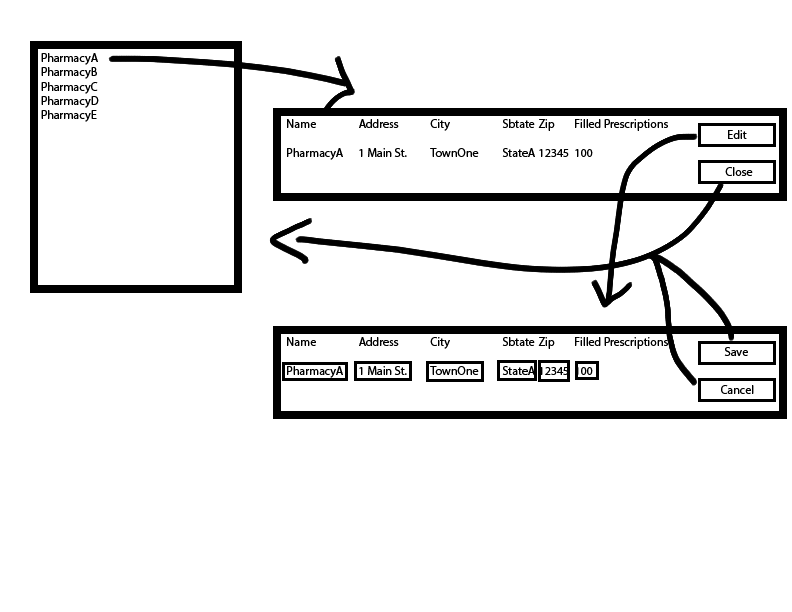
<style>
.page{position:relative;width:792px;height:612px;background:#ffffff}
.page>*{position:absolute;margin:0}
.t1{font:12px "MyriadPro-Regular";color:#000000}
</style>
<div class="page">
<p class="t1" style="left:41px;top:53px;width:58px;height:69px">PharmacyA<br>PharmacyB<br>PharmacyC<br>PharmacyD<br>PharmacyE</p>
<p class="t1" style="left:287px;top:119px;width:381px;height:41px">Name  Address City  Sbtate Zip Filled Prescriptions<br><br>PharmacyA  1 Main St.  TownOne  StateA  12345  100</p>
<p class="t1" style="left:728px;top:130px;width:19px;height:9px">Edit</p>
<p class="t1" style="left:725px;top:167px;width:28px;height:9px">Close</p>
<p class="t1" style="left:724px;top:347px;width:24px;height:9px">Save</p>
<p class="t1" style="left:721px;top:385px;width:33px;height:9px">Cancel</p>
</div>
